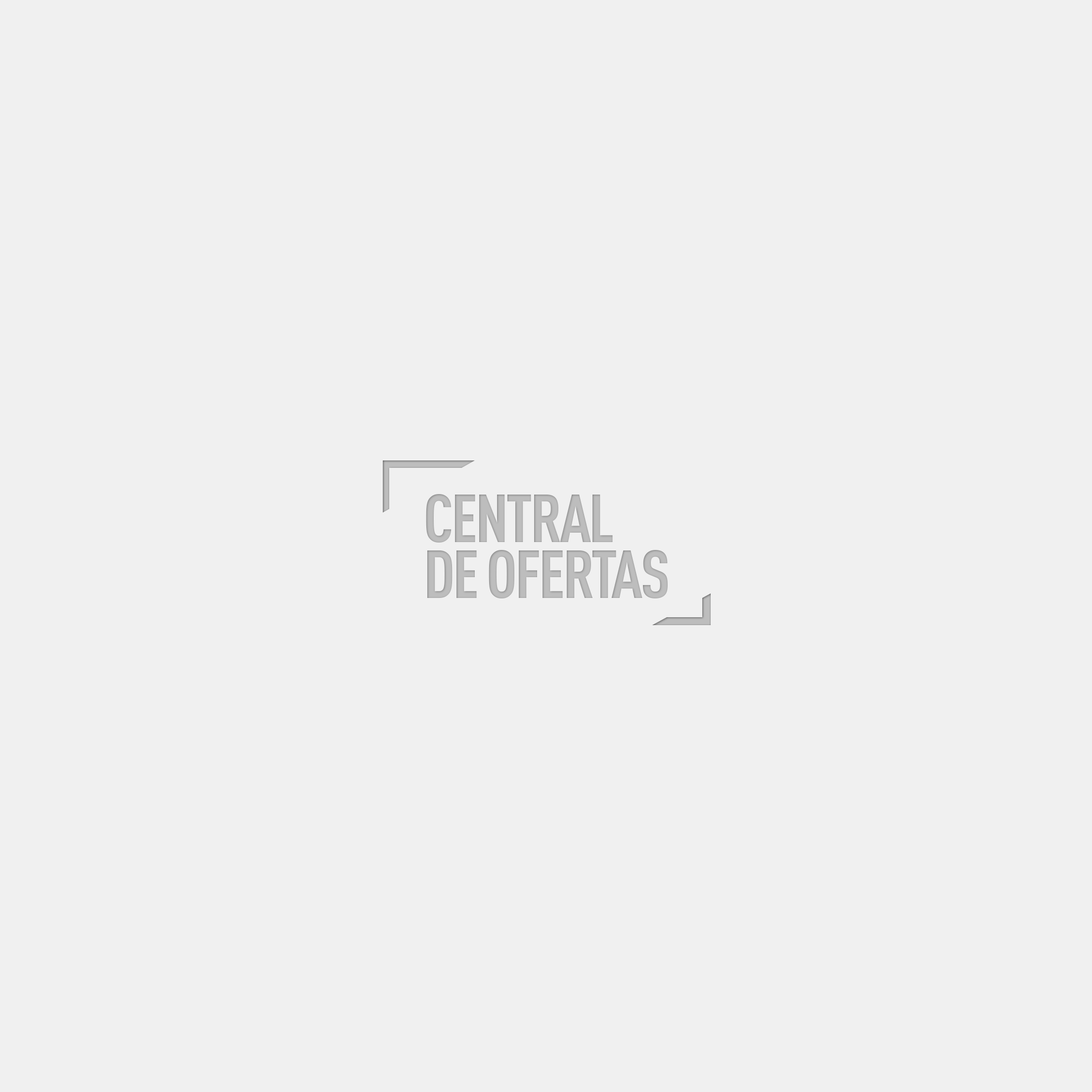
<style>
.page{position:relative;width:1092px;height:1092px;background:#f0f0f0}
.page>*{position:absolute;margin:0}
.t1{font:67px/55.8px "DINCond-Bold";letter-spacing:-0.035em;color:#bcbcbc;text-transform:uppercase}
</style>
<div class="page">
<p class="t1" style="left:426px;top:494px;width:242px;height:105px">central<br>de ofertas</p>
</div>
